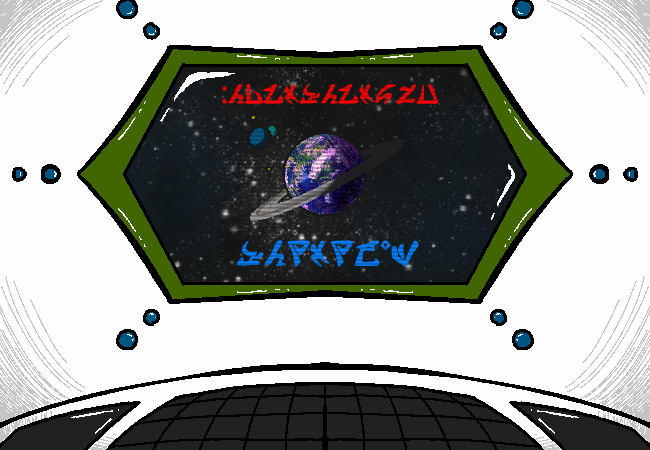
<style>
.page{position:relative;width:650px;height:450px;background:#fffeff}
.page>*{position:absolute;margin:0}
.t1{font:34px "HiveswapAlternian-Regular"}
.t2{font:34px "HiveswapAlternian-Regular";color:#ff0000}
.t3{font:44px "HiveswapAlternian-Regular"}
</style>
<div class="page">
<p class="t1" style="left:222px;top:86px;width:5px;height:18px">:</p>
<p class="t1" style="left:228px;top:84px;width:17px;height:20px">N</p>
<p class="t1" style="left:245px;top:83px;width:18px;height:21px">O</p>
<p class="t2" style="left:263px;top:84px;width:21px;height:20px">I</p>
<p class="t1" style="left:284px;top:84px;width:15px;height:21px">T</p>
<p class="t2" style="left:299px;top:84px;width:21px;height:20px">A</p>
<p class="t1" style="left:321px;top:84px;width:17px;height:20px">N</p>
<p class="t2" style="left:338px;top:84px;width:21px;height:20px">I</p>
<p class="t1" style="left:359px;top:84px;width:15px;height:21px">T</p>
<p class="t1" style="left:375px;top:84px;width:21px;height:20px">S</p>
<p class="t1" style="left:396px;top:84px;width:20px;height:21px">E</p>
<p class="t1" style="left:416px;top:84px;width:23px;height:20px">D</p>
<p class="t3" style="left:236px;top:241px;width:28px;height:25px">A</p>
<p class="t3" style="left:264px;top:240px;width:22px;height:26px">N</p>
<p class="t3" style="left:287px;top:240px;width:23px;height:27px">U</p>
<p class="t3" style="left:310px;top:240px;width:20px;height:27px">T</p>
<p class="t3" style="left:330px;top:240px;width:23px;height:27px">U</p>
<p class="t3" style="left:354px;top:240px;width:26px;height:26px">Y</p>
<p class="t3" style="left:380px;top:240px;width:11px;height:10px">'</p>
<p class="t3" style="left:391px;top:240px;width:28px;height:27px">M</p>
</div>
